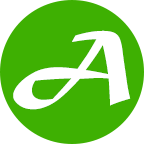
<style>
.page{position:relative;width:144px;height:144px;background:#3eb002}
.page>*{position:absolute;margin:0}
.t1{font:90px "MaturaMTScriptCapitals";color:#ffffff}
</style>
<div class="page">
<p class="t1" style="left:13px;top:30px;width:118px;height:80px">A</p>
</div>
